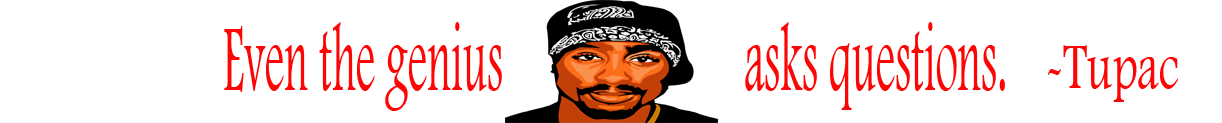
<style>
.page{position:relative;width:1222px;height:123px;background:#ffffff}
.page>*{position:absolute;margin:0}
.t1{font:97.6px "FootlightMTLight";color:#fe0505;scale:0.45 1}
.t2{font:67.7px "FootlightMTLight";color:#fe0505;scale:0.68 1}
</style>
<div class="page">
<p class="t1" style="left:224px;top:22px;width:781px;height:89px">Even the genius                      asks questions.</p>
<p class="t2" style="left:1048px;top:45px;width:130px;height:57px">-Tupac</p>
</div>
